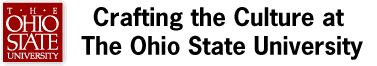
<style>
.page{position:relative;width:377px;height:66px;background:#ffffff}
.page>*{position:absolute;margin:0}
.t1{font:24px "NewsGothicStd-Bold";color:#000000}
</style>
<div class="page">
<p class="t1" style="left:81px;top:7px;width:282px;height:53px;text-align:center">Crafting the Culture at <br>The Ohio State University</p>
</div>
